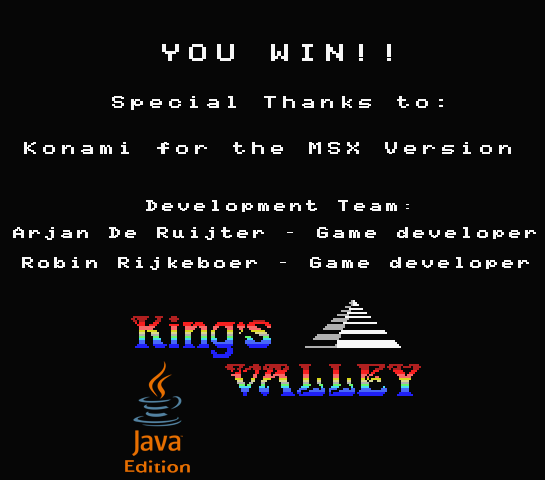
<style>
.page{position:relative;width:545px;height:480px;background:#060606}
.page>*{position:absolute;margin:0}
.t1{font:17.9px "MSX-WIDTH32J";color:#f7f7f7;font-weight:bold;scale:1.43 1}
.t2{font:14px "MSX-WIDTH32J";color:#f7f7f7;font-weight:bold;scale:1.25 1}
.t3{font:12px "MSX-WIDTH32J";color:#f7f7f7;font-weight:bold;scale:1.25 1}
.t4{font:18px "QuattrocentoSans-Bold";color:#e76f00;scale:1.25 1}
</style>
<div class="page">
<p class="t1" style="left:162px;top:44px;width:229px;height:17px">YOU WIN!!</p>
<p class="t2" style="left:112px;top:96px;width:331px;height:14px">Special Thanks to:</p>
<p class="t2" style="left:24px;top:142px;width:487px;height:12px">Konami for the MSX Version</p>
<p class="t3" style="left:146px;top:200px;width:263px;height:12px">Development Team:</p>
<p class="t3" style="left:13px;top:227px;width:523px;height:13px">Arjan De Ruijter - Game developer</p>
<p class="t3" style="left:22px;top:257px;width:507px;height:13px">Robin Rijkeboer - Game developer</p>
<p class="t4" style="left:125px;top:460px;width:65px;height:13px">Edition</p>
</div>
